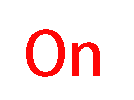
<style>
.page{position:relative;width:134px;height:100px;background:#ffffff}
.page>*{position:absolute;margin:0}
.t1{font:60px "AdobeFanHeitiStd-Bold";color:#fe0606}
</style>
<div class="page">
<p class="t1" style="left:26px;top:29px;width:74px;height:48px">On</p>
</div>
